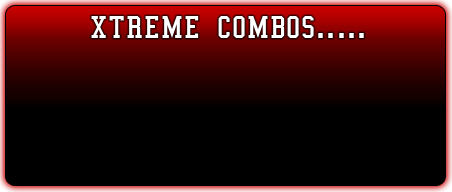
<style>
.page{position:relative;width:452px;height:192px;background:#000000}
.page>*{position:absolute;margin:0}
.t1{font:46px "CollegeSemiCondensed";letter-spacing:0.025em;color:#ffffff;font-variant:small-caps}
</style>
<div class="page">
<p class="t1" style="left:91px;top:16px;width:273px;height:22px">xtreme combos.....</p>
</div>
